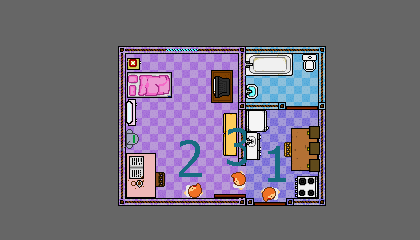
<style>
.page{position:relative;width:420px;height:240px;background:#666666}
.page>*{position:absolute;margin:0}
.t1{font:49.9px "Tahoma";color:#176d82}
</style>
<div class="page">
<p class="t1" style="left:227px;top:128px;width:22px;height:38px">3</p>
<p class="t1" style="left:179px;top:140px;width:23px;height:37px">2</p>
<p class="t1" style="left:268px;top:146px;width:18px;height:36px">1</p>
</div>
